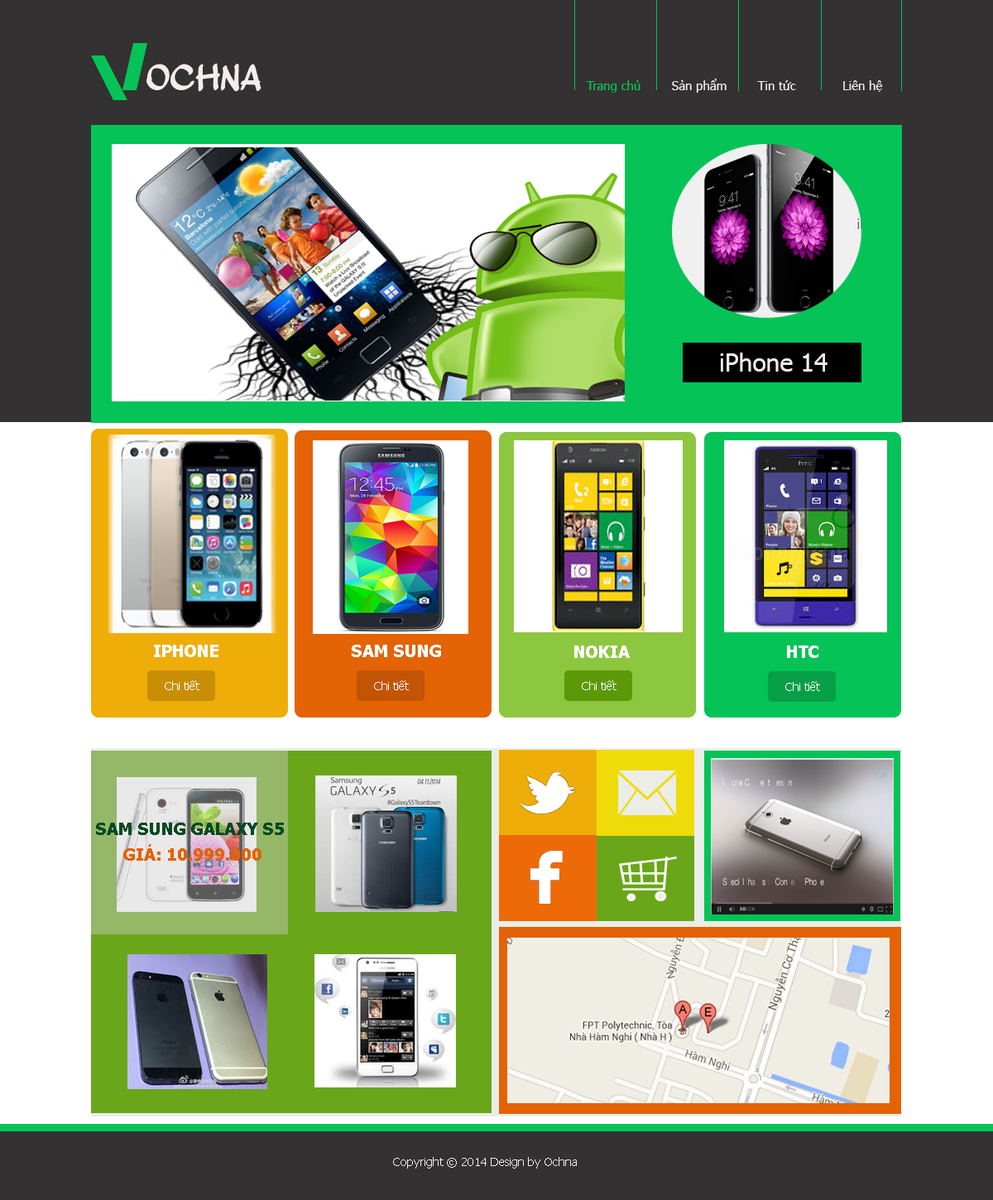
<style>
.page{position:relative;width:993px;height:1200px;background:#333131}
.page>*{position:absolute;margin:0}
.t1{font:37.3px "MatiasFont";color:#f6ecec}
.t2{font:12.4px "Tahoma";color:#f6ecec}
.t3{font:12.4px "Tahoma";color:#05c357}
.t4{font:24.8px "Tahoma";color:#f6ecec}
.t5{font:16.6px "Tahoma-Bold";color:#ffffff}
.t6{font:11.6px "Tahoma";color:#ffffff}
.t7{font:16.6px "Tahoma-Bold";color:#034a22}
.t8{font:16.6px "Tahoma-Bold";color:#e36305}
.t9{font:11.6px "Tahoma";color:#f6ecec}
</style>
<div class="page">
<p class="t1" style="left:147px;top:63px;width:115px;height:29px">OCHNA</p>
<p class="t2" style="left:586px;top:79px;width:297px;height:14px"><span class="t3">Trang chủ</span>        Sản phẩm        Tin tức            Liên hệ</p>
<p class="t4" style="left:720px;top:353px;width:108px;height:19px">iPhone 14</p>
<p class="t5" style="left:154px;top:645px;width:65px;height:12px">IPHONE</p>
<p class="t5" style="left:352px;top:645px;width:89px;height:12px">SAM SUNG</p>
<p class="t5" style="left:575px;top:646px;width:55px;height:12px">NOKIA</p>
<p class="t5" style="left:787px;top:646px;width:32px;height:12px">HTC</p>
<p class="t6" style="left:165px;top:680px;width:35px;height:10px">Chi tiết</p>
<p class="t6" style="left:374px;top:680px;width:35px;height:10px">Chi tiết</p>
<p class="t6" style="left:582px;top:680px;width:35px;height:10px">Chi tiết</p>
<p class="t6" style="left:786px;top:681px;width:34px;height:10px">Chi tiết</p>
<p class="t7" style="left:96px;top:823px;width:188px;height:12px">SAM SUNG GALAXY S5</p>
<p class="t8" style="left:123px;top:844px;width:139px;height:17px">GIÁ: 10.999.000</p>
<p class="t9" style="left:393px;top:1157px;width:184px;height:12px">Copyright © 2014 Design by Ochna</p>
</div>
